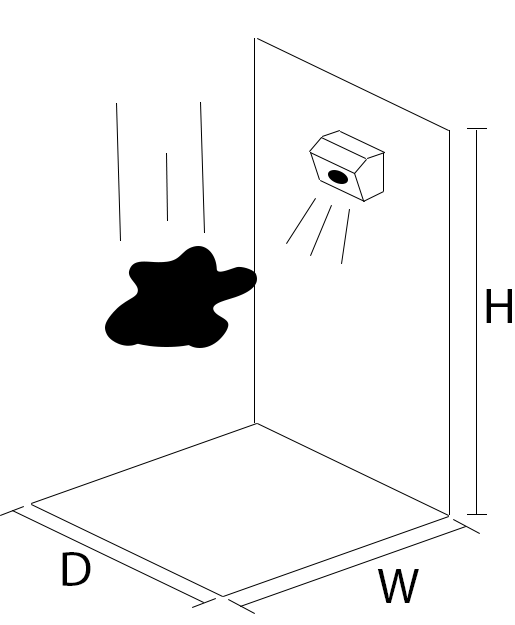
<style>
.page{position:relative;width:515px;height:625px;background:#ffffff}
.page>*{position:absolute;margin:0}
.t1{font:12px "MyriadPro-Regular";color:#000000}
</style>
<div class="page">
<p class="t1" style="left:486px;top:289px;width:26px;height:34px">H</p>
<p class="t1" style="left:62px;top:552px;width:29px;height:34px">D</p>
<p class="t1" style="left:377px;top:569px;width:42px;height:34px">W</p>
</div>
